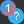
<style>
.page{position:relative;width:24px;height:24px;background:#333333}
.page>*{position:absolute;margin:0}
.t1{font:11px "ArialMT";color:#ffffff}
.t2{font:11px "ArialMT";color:#fefefe}
</style>
<div class="page">
<p class="t1" style="left:6px;top:4px;width:3px;height:8px">1</p>
<p class="t2" style="left:14px;top:12px;width:5px;height:8px">?</p>
</div>
